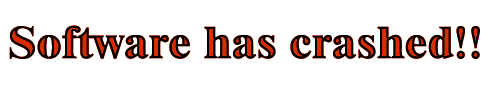
<style>
.page{position:relative;width:490px;height:85px;background:#ffffff}
.page>*{position:absolute;margin:0}
.t1{font:46px "Dutch801BT-ExtraBold"}
</style>
<div class="page">
<p class="t1" style="left:9px;top:25px;width:471px;height:34px">Software has crashed!!</p>
</div>
